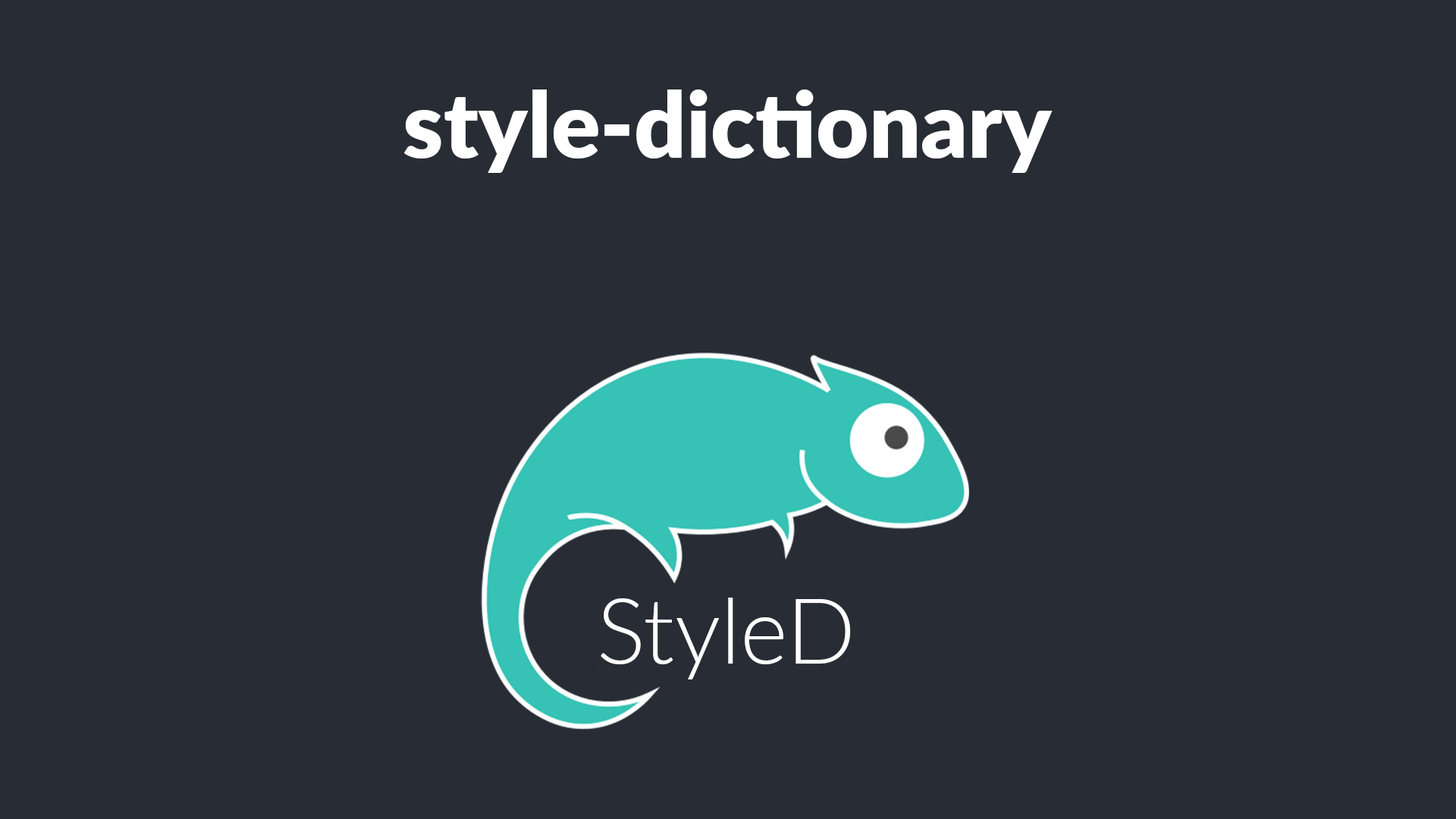
<style>
.page{position:relative;width:1456px;height:819px;background:#282c35}
.page>*{position:absolute;margin:0}
.t1{font:91px "Lato-ExtraBold";color:#ffffff}
.t2{font:91px "Lato-Light";color:#ffffff}
</style>
<div class="page">
<p class="t1" style="left:403px;top:89px;width:650px;height:84px">style-dictionary</p>
<p class="t2" style="left:601px;top:598px;width:250px;height:81px">StyleD</p>
</div>
